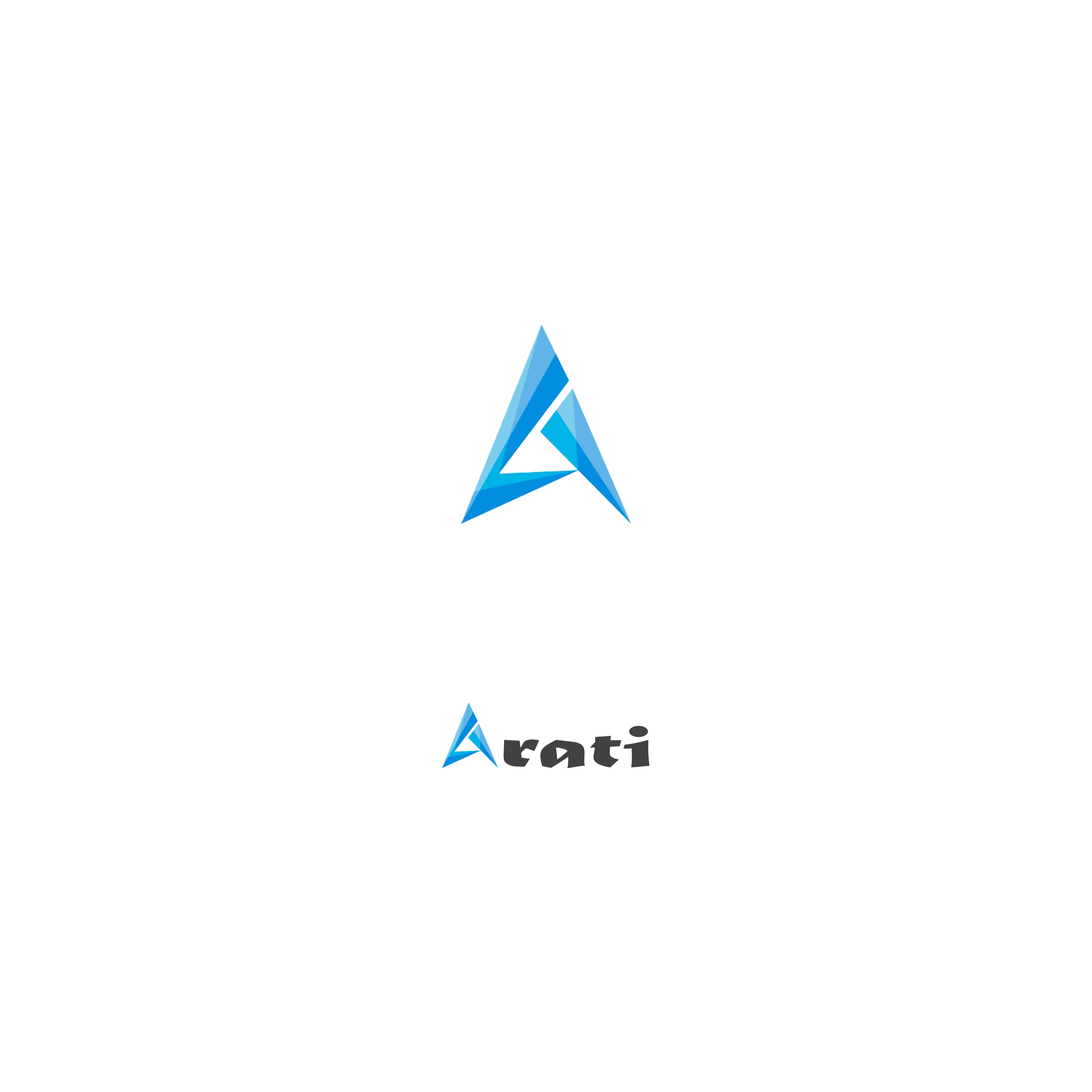
<style>
.page{position:relative;width:1092px;height:1092px;background:#ffffff}
.page>*{position:absolute;margin:0}
.t1{font:63.1px "MaturaMTScriptCapitals";color:#424242;scale:1.66 1}
</style>
<div class="page">
<p class="t1" style="left:503px;top:726px;width:147px;height:42px">rati</p>
</div>
